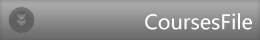
<style>
.page{position:relative;width:260px;height:40px}
.page>*{position:absolute;margin:0}
.t1{font:20px "MicrosoftYaHei";color:#ffffff}
</style>
<div class="page">
<p class="t1" style="left:145px;top:13px;width:107px;height:17px">CoursesFile</p>
</div>
